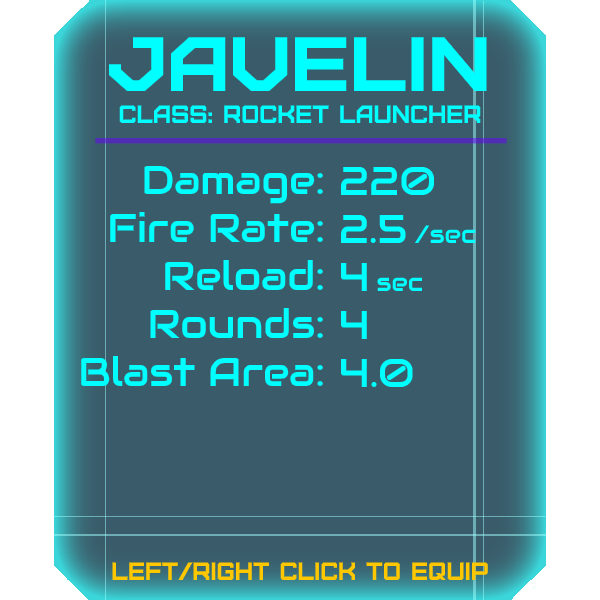
<style>
.page{position:relative;width:600px;height:600px;background:#3a5c6a}
.page>*{position:absolute;margin:0}
.t1{font:76.8px "Furore";color:#00ffff;scale:1.13 1}
.t2{font:25px "Furore";color:#00ffff}
.t3{font:40px "Audiowide-Regular";color:#00ffff}
.t4{font:25px "Audiowide-Regular";color:#00ffff}
.t5{font:25px "Furore";color:#ffc700}
</style>
<div class="page">
<p class="t1" style="left:108px;top:37px;width:379px;height:54px">Javelin</p>
<p class="t2" style="left:119px;top:105px;width:362px;height:18px">Class: rocket launcher</p>
<p class="t3" style="left:81px;top:165px;width:242px;height:221px;text-align:right">Damage:<br>Fire Rate:<br>Reload:<br>Rounds:<br>Blast Area:</p>
<p class="t3" style="left:341px;top:166px;width:135px;height:221px">220<br>2.5 <span class="t4">/sec<br></span>4 <span class="t4">sec<br></span>4<br>4.0</p>
<p class="t5" style="left:112px;top:562px;width:376px;height:18px">left/right click to equip</p>
</div>
